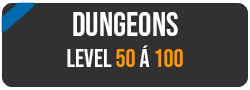
<style>
.page{position:relative;width:250px;height:90px;background:#313131}
.page>*{position:absolute;margin:0}
.t1{font:33.3px "BebasNeue-Regular";color:#ffffff}
.t2{font:25px "BebasNeue-Regular";color:#ffffff}
.t3{font:25px "BebasNeue-Regular";color:#ff9600}
</style>
<div class="page">
<p class="t1" style="left:73px;top:12px;width:105px;height:24px">Dungeons</p>
<p class="t2" style="left:67px;top:45px;width:116px;height:22px">level <span class="t3">50 </span>á <span class="t3">100</span></p>
</div>
